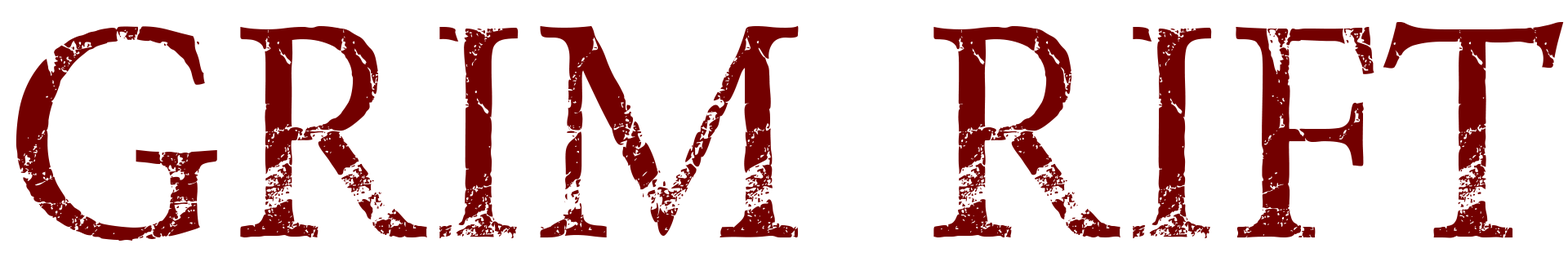
<style>
.page{position:relative;width:1568px;height:257px;background:#ffffff}
.page>*{position:absolute;margin:0}
.t1{font:315.4px "NIGHTMAREPILLS";color:#730000}
</style>
<div class="page">
<p class="t1" style="left:16px;top:22px;width:1548px;height:219px">GRIM RIFT</p>
</div>
